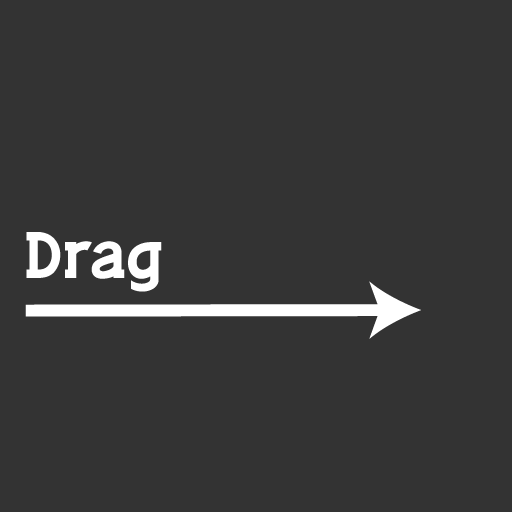
<style>
.page{position:relative;width:512px;height:512px;background:#333333}
.page>*{position:absolute;margin:0}
.t1{font:54px "LifestyleM54";color:#ffffff}
</style>
<div class="page">
<p class="t1" style="left:26px;top:232px;width:136px;height:60px">Drag</p>
</div>
